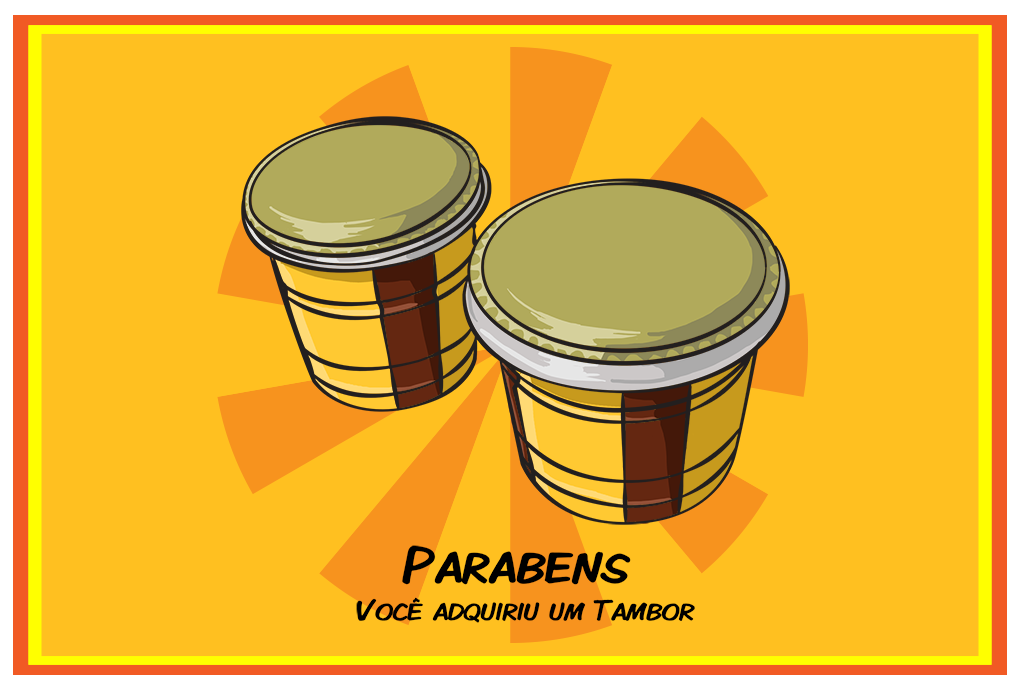
<style>
.page{position:relative;width:1024px;height:692px;background:#ffc020}
.page>*{position:absolute;margin:0}
.t1{font:29.6px/37.8px "KomikaDisplayKaps";color:#000000}
.t2{font:53.5px/37.8px "KomikaDisplayKaps";color:#000000}
</style>
<div class="page">
<p class="t1" style="left:356px;top:545px;width:339px;height:78px;text-align:center"><span class="t2">Parabens <br></span>Você adquiriu um Tambor</p>
</div>
